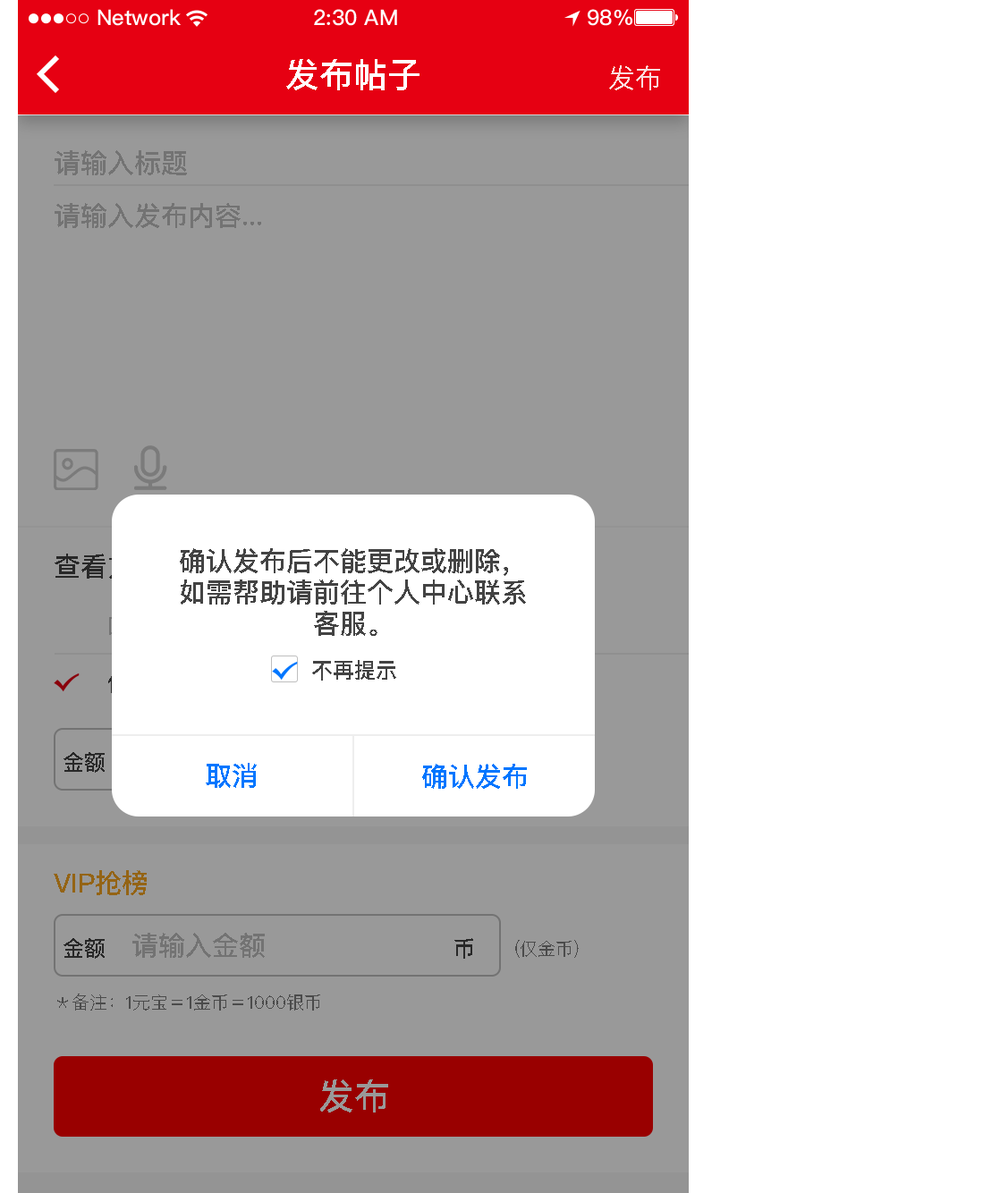
<style>
.page{position:relative;width:1000px;height:1193px;background:#ffffff}
.page>*{position:absolute;margin:0}
.t1{font:34px "PingFangSC-Medium";color:#ffffff;text-transform:uppercase}
.t2{font:26.8px "PingFangSC-Regular";color:#faddde;text-transform:uppercase}
.t3{font:26.8px "PingFangSC-Medium";color:#737373;text-transform:uppercase}
.t4{font:26.8px "PingFangSC-Medium";text-transform:uppercase}
.t5{font:26.8px/31.3px "PingFangSC-Medium";color:#434343;text-transform:uppercase}
.t6{font:21.5px "PingFangSC-Medium";color:#434343;text-transform:uppercase}
.t7{font:21.5px "PingFangSC-Medium";color:#282828;text-transform:uppercase}
.t8{font:26.8px "PingFangSC-Medium";color:#0076ff;text-transform:uppercase}
.t9{font:26.8px "PingFangSC-Medium";color:#946415;text-transform:uppercase}
.t10{font:17.9px "PingFangSC-Regular";color:#4b4b4b;text-transform:uppercase}
.t11{font:35.8px "PingFangSC-Medium";color:#999999;text-transform:uppercase}
</style>
<div class="page">
<p class="t1" style="left:286px;top:59px;width:133px;height:31px">发布帖子</p>
<p class="t2" style="left:609px;top:65px;width:51px;height:25px">发布</p>
<p class="t3" style="left:55px;top:150px;width:132px;height:25px">请输入标题</p>
<p class="t3" style="left:55px;top:203px;width:206px;height:25px">请输入发布内容...</p>
<p class="t4" style="left:55px;top:553px;width:105px;height:26px">查看方式</p>
<p class="t5" style="left:180px;top:548px;width:346px;height:88px;text-align:center">确认发布后不能更改或删除，<br>如需帮助请前往个人中心联系<br>客服。</p>
<p class="t6" style="left:312px;top:660px;width:84px;height:20px">不再提示</p>
<p class="t7" style="left:63px;top:752px;width:42px;height:21px">金额</p>
<p class="t8" style="left:206px;top:763px;width:51px;height:25px">取消</p>
<p class="t8" style="left:422px;top:764px;width:105px;height:25px">确认发布</p>
<p class="t9" style="left:54px;top:870px;width:93px;height:25px">vip抢榜</p>
<p class="t7" style="left:63px;top:938px;width:42px;height:21px">金额</p>
<p class="t3" style="left:132px;top:933px;width:133px;height:25px">请输入金额</p>
<p class="t7" style="left:454px;top:938px;width:19px;height:21px">币</p>
<p class="t10" style="left:515px;top:940px;width:64px;height:18px">(仅金币)</p>
<p class="t10" style="left:57px;top:993px;width:263px;height:17px">＊备注：1元宝＝1金币＝1000银币</p>
<p class="t11" style="left:320px;top:1079px;width:68px;height:33px">发布</p>
</div>
